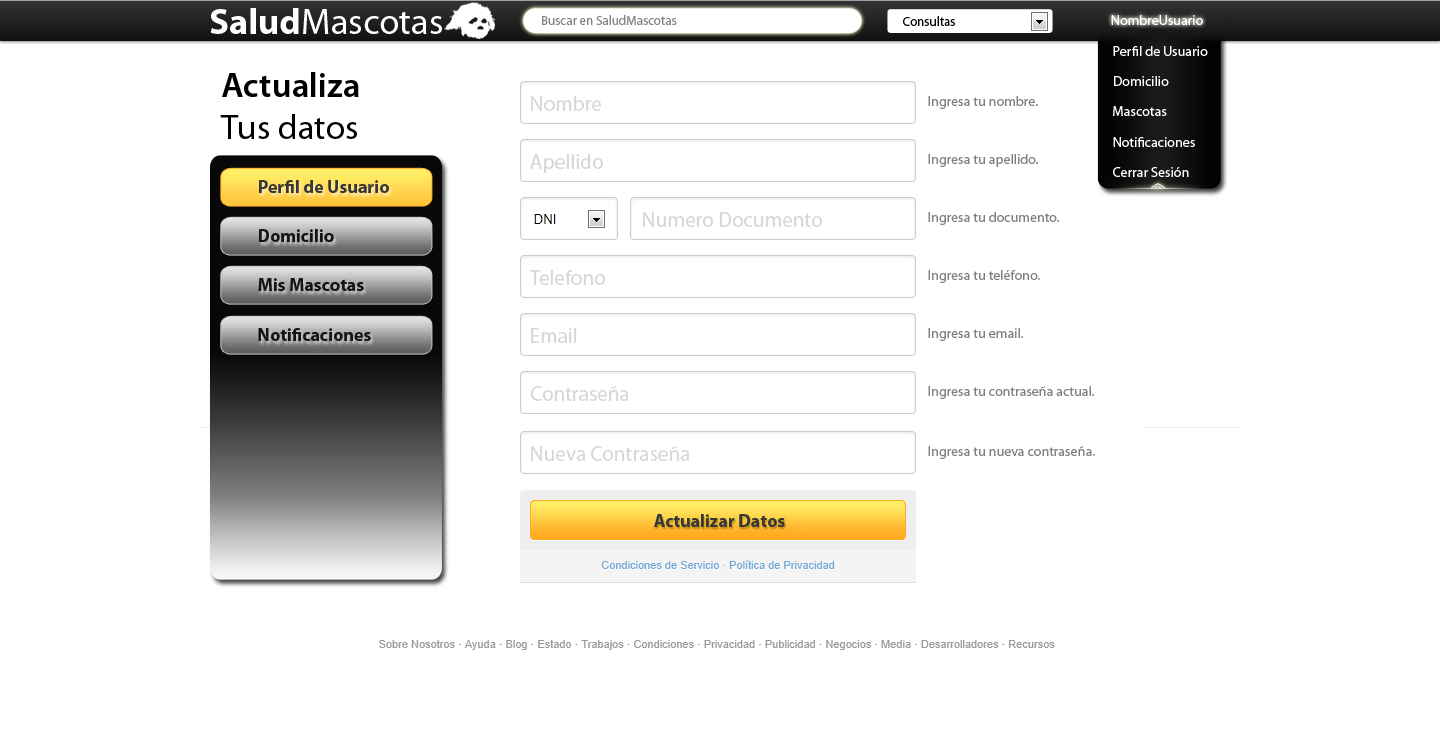
<style>
.page{position:relative;width:1440px;height:750px;background:#ffffff}
.page>*{position:absolute;margin:0}
.t1{font:36.6px "MyriadPro-Regular";color:#ffffff}
.t2{font:36.6px "MyriadPro-Bold";color:#ffffff}
.t3{font:13px "MyriadPro-Regular";color:#878088}
.t4{font:13px "MyriadPro-Regular";color:#000000}
.t5{font:14px "MyriadPro-Semibold"}
.t6{font:14px "MyriadPro-Regular";color:#ffffff}
.t7{font:35px "MyriadPro-Semibold";color:#000000}
.t8{font:35px "MyriadPro-Regular";color:#000000}
.t9{font:21px "MyriadPro-Regular";color:#d6d6d6}
.t10{font:14px "MyriadPro-Regular";color:#808080}
.t11{font:18px "MyriadPro-Bold";color:#373737}
.t12{font:18px "MyriadPro-Bold";color:#141414}
</style>
<div class="page">
<p class="t1" style="left:210px;top:8px;width:232px;height:26px"><span class="t2">Salud</span>Mascotas</p>
<p class="t3" style="left:542px;top:15px;width:135px;height:10px">Buscar en SaludMascotas</p>
<p class="t4" style="left:903px;top:16px;width:52px;height:10px">Consultas</p>
<p class="t5" style="left:1110px;top:15px;width:95px;height:10px">NombreUsuario</p>
<p class="t6" style="left:1111px;top:15px;width:92px;height:10px">NombreUsuario</p>
<p class="t6" style="left:1111px;top:15px;width:92px;height:10px">NombreUsuario</p>
<p class="t6" style="left:1113px;top:46px;width:95px;height:10px">Perfil de Usuario</p>
<p class="t7" style="left:220px;top:72px;width:139px;height:67px">Actualiza<br><span class="t8">Tus datos</span></p>
<p class="t6" style="left:1114px;top:76px;width:55px;height:10px">Domicilio</p>
<p class="t9" style="left:531px;top:96px;width:70px;height:15px">Nombre</p>
<p class="t10" style="left:928px;top:96px;width:110px;height:13px">Ingresa tu nombre.</p>
<p class="t6" style="left:1113px;top:106px;width:54px;height:10px">Mascotas</p>
<p class="t6" style="left:1113px;top:137px;width:82px;height:10px">Notificaciones</p>
<p class="t9" style="left:530px;top:154px;width:73px;height:19px">Apellido</p>
<p class="t10" style="left:928px;top:154px;width:110px;height:13px">Ingresa tu apellido.</p>
<p class="t6" style="left:1113px;top:167px;width:76px;height:10px">Cerrar Sesión</p>
<p class="t11" style="left:259px;top:180px;width:130px;height:13px">Perfil de Usuario</p>
<p class="t9" style="left:643px;top:212px;width:179px;height:15px">Numero Documento</p>
<p class="t10" style="left:928px;top:212px;width:131px;height:13px">Ingresa tu documento.</p>
<p class="t12" style="left:259px;top:229px;width:75px;height:13px">Domicilio</p>
<p class="t9" style="left:529px;top:270px;width:76px;height:15px">Telefono</p>
<p class="t10" style="left:928px;top:270px;width:112px;height:13px">Ingresa tu teléfono.</p>
<p class="t12" style="left:258px;top:278px;width:106px;height:13px">Mis Mascotas</p>
<p class="t12" style="left:258px;top:328px;width:113px;height:13px">Notificaciones</p>
<p class="t9" style="left:531px;top:328px;width:46px;height:15px">Email</p>
<p class="t10" style="left:928px;top:328px;width:95px;height:13px">Ingresa tu email.</p>
<p class="t9" style="left:530px;top:386px;width:99px;height:15px">Contraseña</p>
<p class="t10" style="left:928px;top:386px;width:166px;height:13px">Ingresa tu contraseña actual.</p>
<p class="t9" style="left:531px;top:446px;width:159px;height:15px">Nueva Contraseña</p>
<p class="t10" style="left:928px;top:446px;width:167px;height:13px">Ingresa tu nueva contraseña.</p>
<p class="t11" style="left:654px;top:514px;width:131px;height:13px">Actualizar Datos</p>
</div>
